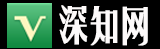
<style>
.page{position:relative;width:160px;height:49px;background:#000000}
.page>*{position:absolute;margin:0}
.t1{font:40px "FZYTK--GBK1-0";letter-spacing:-0.09em;color:#fdfafa;font-weight:bold}
</style>
<div class="page">
<p class="t1" style="left:59px;top:5px;width:29px;height:40px">深</p>
<p class="t1" style="left:90px;top:6px;width:58px;height:40px">知网</p>
</div>
